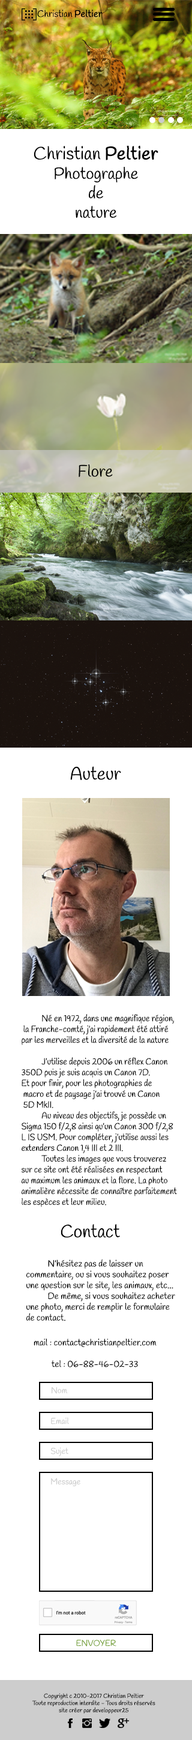
<style>
.page{position:relative;width:192px;height:1740px;background:#ffffff}
.page>*{position:absolute;margin:0}
.t1{font:9.6px "Handlee-Regular";color:#000000}
.t2{font:9.6px "Handlee-Regular";color:#000000;font-weight:bold}
.t3{font:16.2px "Handlee-Regular";color:#000000}
.t4{font:18px "Handlee-Regular";color:#000000}
.t5{font:18px "Handlee-Regular";color:#000000;font-weight:bold}
.t6{font:9px "Handlee-Regular";color:#000000;scale:0.94 1}
.t7{font:9px "Handlee-Regular";color:#000000}
.t8{font:8.4px "Handlee-Regular";color:#cccccc}
.t9{font:8.4px "Handlee-Regular";color:#77a23a}
.t10{font:6px "Handlee-Regular";color:#000000}
</style>
<div class="page">
<p class="t1" style="left:37px;top:10px;width:66px;height:7px">Christian <span class="t2">Peltier</span></p>
<p class="t3" style="left:34px;top:145px;width:124px;height:73px;text-align:center"><span class="t4">Christian </span><span class="t5">Peltier<br></span>Photographe<br>de<br>nature</p>
<p class="t3" style="left:79px;top:464px;width:34px;height:13px">Flore</p>
<p class="t4" style="left:70px;top:766px;width:51px;height:15px">Auteur</p>
<p class="t6" style="left:21px;top:1014px;width:156px;height:193px">Né en 1972, dans une magnifique région,<br> la Franche-comté, j’ai rapidement été attiré <br>par les merveilles et la diversité de la nature<br><br> J’utilise depuis 2006 un réflex Canon <br>350D puis je suis acquis un Canon 7D.<br>Et pour finir, pour les photographies de<br> macro et de paysage j’ai trouvé un Canon<br> 5D MkII. <br> Au niveau des objectifs, je possède un<br>Sigma 150 f/2,8 ainsi qu’un Canon 300 f/2,8<br>L IS USM. Pour compléter, j’utilise aussi les <br>extenders Canon 1,4 III et 2 III.<br> Toutes les images que vous trouverez <br>sur ce site ont été réalisées en respectant <br>au maximum les animaux et la flore. La photo <br>animalière nécessite de connaître parfaitement<br>les espèces et leur milieu.</p>
<p class="t4" style="left:61px;top:1224px;width:59px;height:14px">Contact</p>
<p class="t7" style="left:26px;top:1259px;width:149px;height:62px">N’hésitez pas de laisser un <br>commentaire, ou si vous souhaitez poser <br>une question sur le site, les animaux, etc...<br> De même, si vous souhaitez acheter<br>une photo, merci de remplir le formulaire<br>de contact.</p>
<p class="t7" style="left:34px;top:1339px;width:123px;height:28px;text-align:center">mail : contact@christianpeltier.com<br><br>tel : 06-88-46-02-33</p>
<p class="t8" style="left:52px;top:1387px;width:16px;height:7px">Nom</p>
<p class="t8" style="left:51px;top:1417px;width:18px;height:7px">Email</p>
<p class="t8" style="left:50px;top:1447px;width:18px;height:9px">Sujet</p>
<p class="t8" style="left:51px;top:1478px;width:29px;height:8px">Message</p>
<p class="t9" style="left:76px;top:1639px;width:40px;height:7px">ENVOYER</p>
<p class="t10" style="left:32px;top:1693px;width:123px;height:21px;text-align:center">Copyright c 2010-2017 Christian Peltier<br>Toute reproduction interdite - Tous droits réservés<br>site créer par developpeur25</p>
</div>
